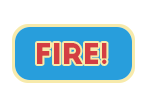
<style>
.page{position:relative;width:150px;height:107px;background:#ffffff}
.page>*{position:absolute;margin:0}
.t1{font:28px "BigJohn";color:#d33e43}
</style>
<div class="page">
<p class="t1" style="left:37px;top:43px;width:70px;height:21px">FIRE!</p>
</div>
